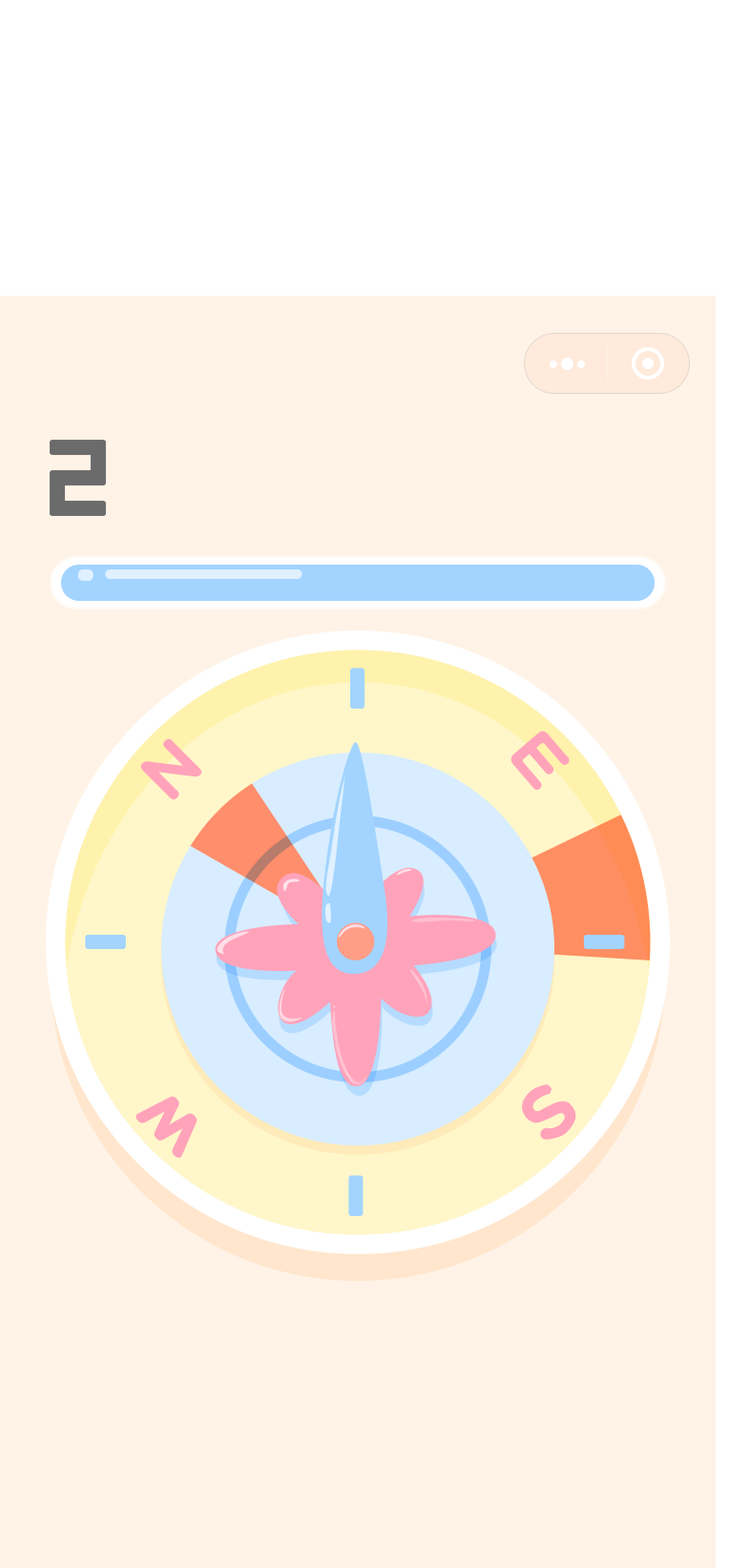
<style>
.page{position:relative;width:729px;height:1568px;background:#fff3e7}
.page>*{position:absolute;margin:0}
.t1{font:70.1px "DFPYuanW9";color:#ffa3bb}
.t2{font:61.5px "DFPYuanW9";color:#ffa3bb;scale:1.31 1}
</style>
<div class="page">
<p class="t1" style="left:510px;top:731px;width:59px;height:59px;rotate:49deg">E</p>
<p class="t1" style="left:140px;top:738px;width:62px;height:62px;rotate:-45deg">N</p>
<p class="t2" style="left:135px;top:1096px;width:62px;height:62px;rotate:-136deg">W</p>
</div>
